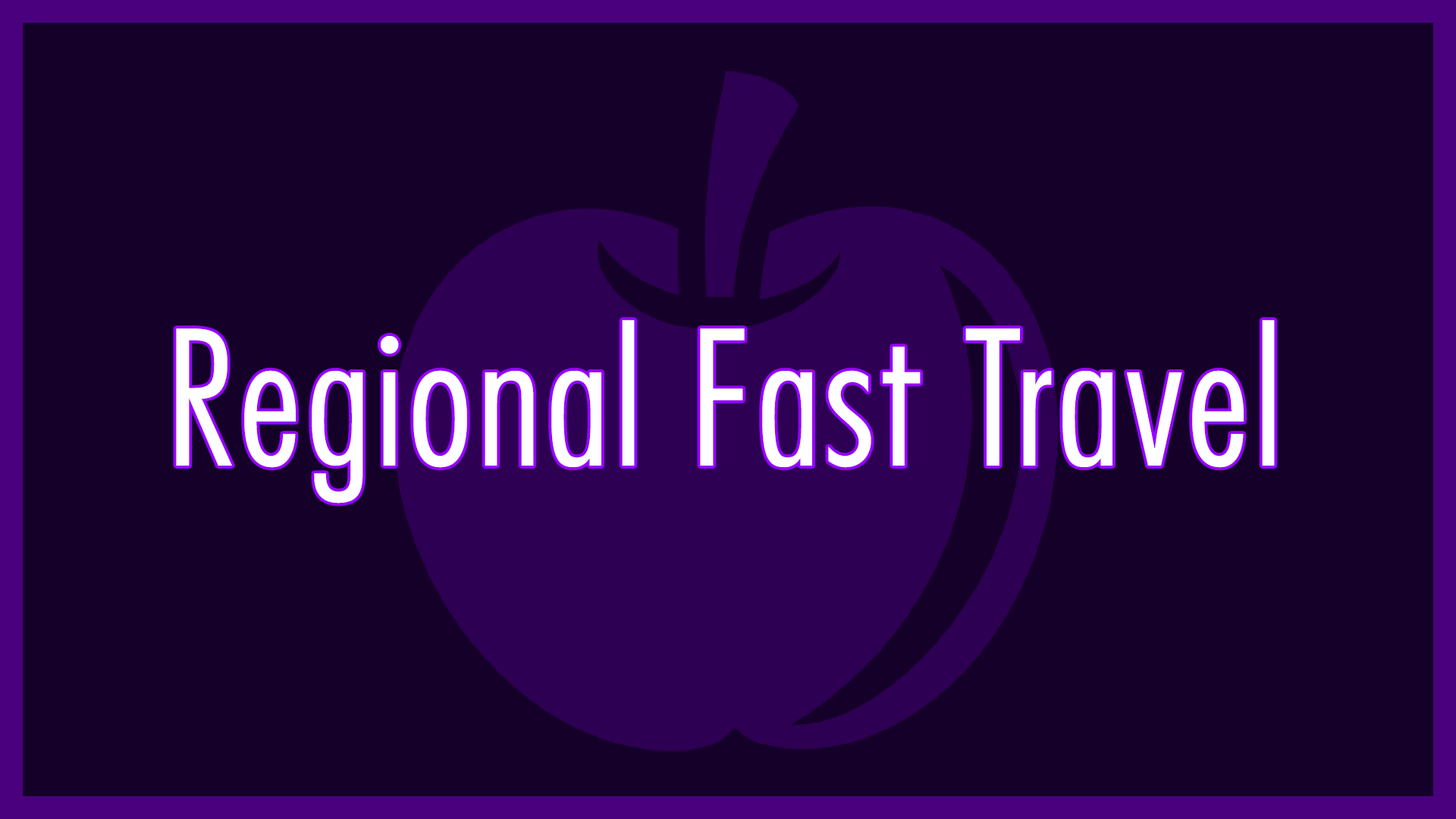
<style>
.page{position:relative;width:1456px;height:819px;background:#140028}
.page>*{position:absolute;margin:0}
.t1{font:181.8px "FuturaStd-CondensedLight";letter-spacing:0.025em;color:#ffffff}
</style>
<div class="page">
<p class="t1" style="left:176px;top:320px;width:1099px;height:184px">Regional Fast Travel</p>
</div>
